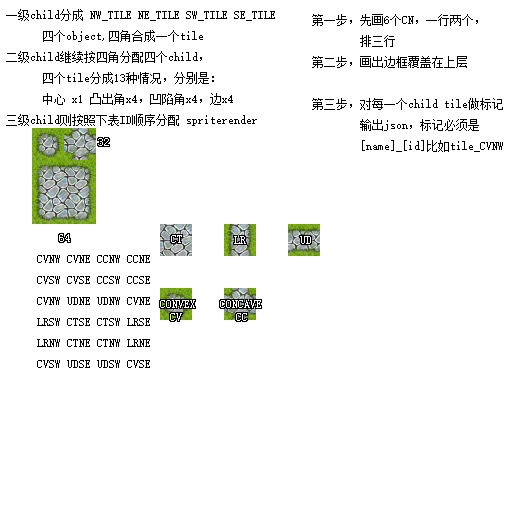
<style>
.page{position:relative;width:512px;height:512px;background:#ffffff}
.page>*{position:absolute;margin:0}
.t1{font:12px "SimSun";color:#000000}
.t2{font:12px "SimSun";color:#ffffff}
</style>
<div class="page">
<p class="t1" style="left:6px;top:9px;width:269px;height:117px">一级child分成 NW_TILE NE_TILE SW_TILE SE_TILE<br> 四个object,四角合成一个tile<br>二级child继续按四角分配四个child，<br>      四个tile分成13种情况，分别是：<br> 中心 x1 凸出角x4，凹陷角x4，边x4<br>三级child则按照下表ID顺序分配 spriterender</p>
<p class="t1" style="left:312px;top:14px;width:191px;height:138px">第一步，先画6个CN，一行两个，<br>        排三行<br>第二步，画出边框覆盖在上层<br><br>第三步，对每一个child tile做标记<br>   输出json，标记必须是<br>   [name]_[id]比如tile_CVNW</p>
<p class="t2" style="left:98px;top:138px;width:11px;height:8px">32</p>
<p class="t2" style="left:59px;top:234px;width:11px;height:8px">64</p>
<p class="t2" style="left:59px;top:234px;width:11px;height:8px">64</p>
<p class="t2" style="left:171px;top:235px;width:11px;height:8px">CT</p>
<p class="t1" style="left:37px;top:255px;width:113px;height:113px">CVNW CVNE CCNW CCNE<br>CVSW CVSE CCSW CCSE<br>CVNW UDNE UDNW CVNE<br>LRSW CTSE CTSW LRSE<br>LRNW CTNE CTNW LRNE<br>CVSW UDSE UDSW CVSE</p>
<p class="t2" style="left:160px;top:300px;width:101px;height:8px">CONVEX    CONCAVE</p>
</div>
